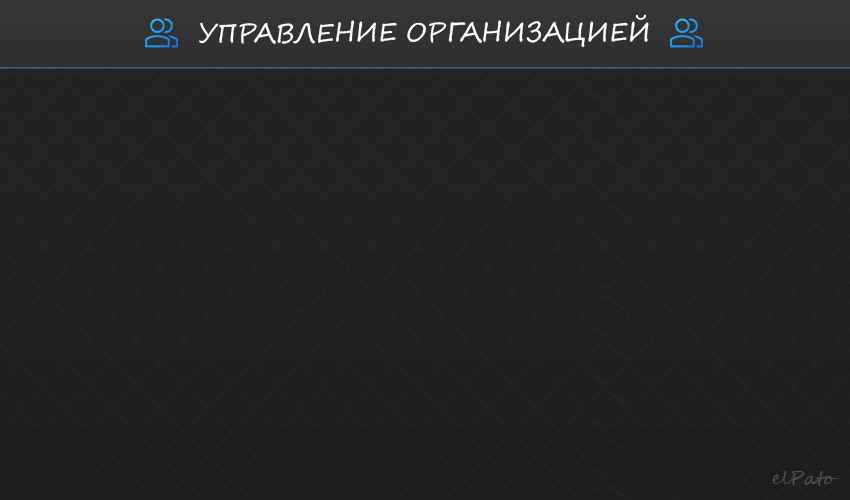
<style>
.page{position:relative;width:850px;height:500px;background:#222222}
.page>*{position:absolute;margin:0}
.t1{font:25.5px "SegoeScript";color:#ffffff}
.t2{font:18.7px "SegoeScript";color:#4d4d4d}
</style>
<div class="page">
<p class="t1" style="left:199px;top:14px;width:450px;height:33px">УПРАВЛЕНИЕ ОРГАНИЗАЦИЕЙ</p>
<p class="t2" style="left:772px;top:471px;width:66px;height:15px">elPato</p>
</div>
